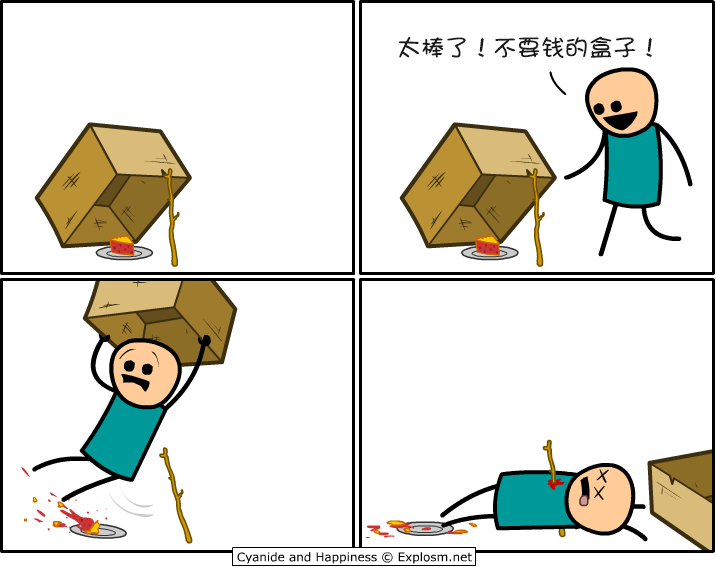
<style>
.page{position:relative;width:716px;height:567px;background:#ffffff}
.page>*{position:absolute;margin:0}
.t1{font:24px "DFPShaoNvW5";color:#1b1b1b}
</style>
<div class="page">
<p class="t1" style="left:398px;top:36px;width:254px;height:22px">太棒了！不要钱的盒子！</p>
</div>
